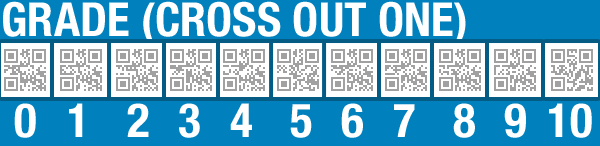
<style>
.page{position:relative;width:600px;height:146px;background:#0080bc}
.page>*{position:absolute;margin:0}
.t1{font:47px "HelveticaNeueLTPro-BdCn";color:#ffffff}
</style>
<div class="page">
<p class="t1" style="left:3px;top:1px;width:463px;height:44px">GRADE (CROSS OUT ONE)</p>
<p class="t1" style="left:14px;top:103px;width:22px;height:35px">0</p>
<p class="t1" style="left:69px;top:103px;width:14px;height:34px">1</p>
<p class="t1" style="left:127px;top:103px;width:22px;height:34px">2</p>
<p class="t1" style="left:179px;top:103px;width:21px;height:35px">3</p>
<p class="t1" style="left:230px;top:103px;width:22px;height:34px">4</p>
<p class="t1" style="left:290px;top:104px;width:22px;height:34px">5</p>
<p class="t1" style="left:341px;top:103px;width:22px;height:35px">6</p>
<p class="t1" style="left:394px;top:104px;width:21px;height:33px">7</p>
<p class="t1" style="left:453px;top:103px;width:22px;height:35px">8</p>
<p class="t1" style="left:504px;top:103px;width:22px;height:35px">9</p>
<p class="t1" style="left:549px;top:103px;width:43px;height:35px">10</p>
</div>
